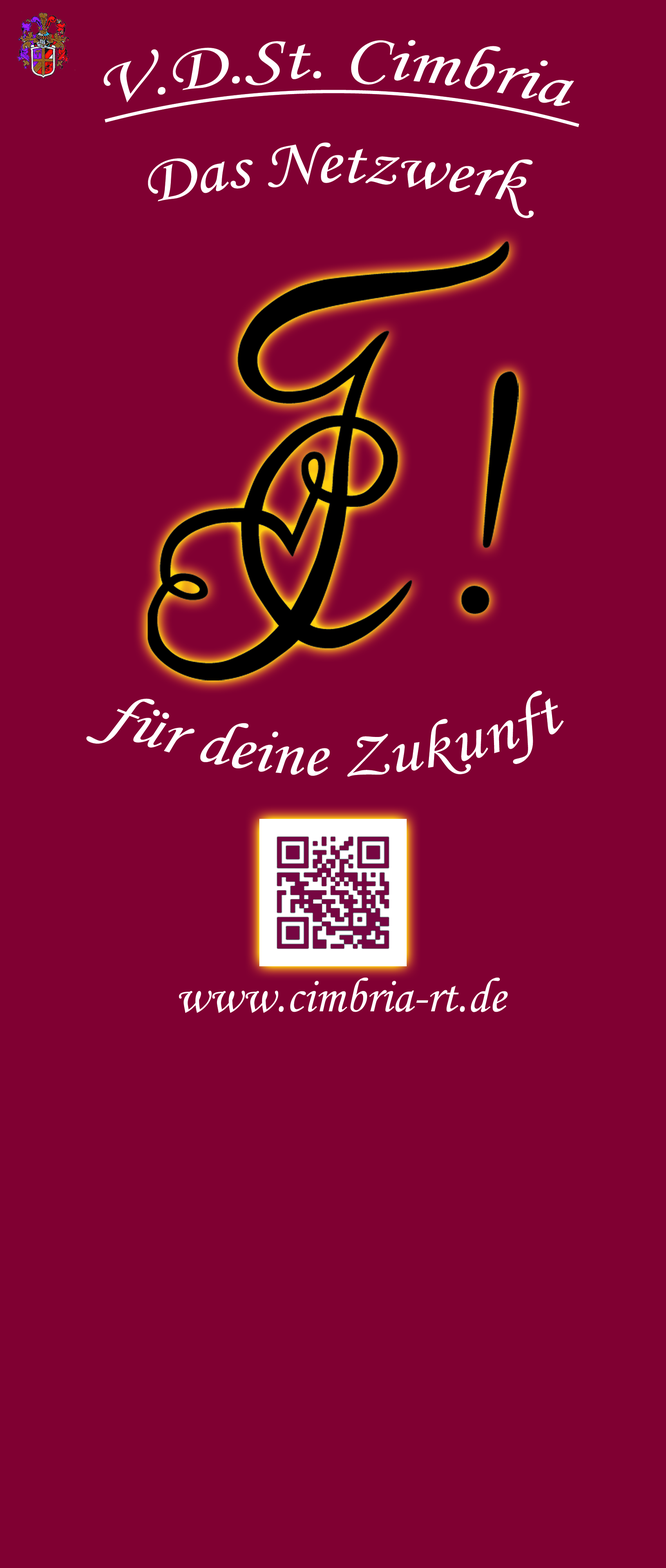
<style>
.page{position:relative;width:666px;height:1568px;background:#800032}
.page>*{position:absolute;margin:0}
.t1{font:65.3px "MonotypeCorsiva";color:#ffffff;text-decoration:underline}
.t2{font:65.3px "MonotypeCorsiva";color:#ffffff}
.t3{font:49px "MonotypeCorsiva";color:#ffffff}
</style>
<div class="page">
<p class="t1" style="left:103px;top:40px;width:477px;height:178px;text-align:center">V.D.St. Cimbria <br><span class="t2">Das Netzwerk</span></p>
<p class="t2" style="left:86px;top:690px;width:478px;height:87px">für deine Zukunft</p>
<p class="t3" style="left:179px;top:977px;width:329px;height:36px">www.cimbria-rt.de</p>
</div>
